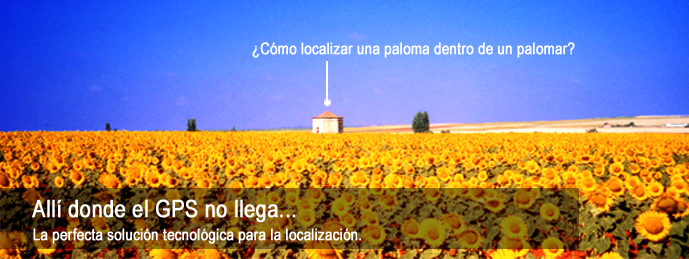
<style>
.page{position:relative;width:689px;height:259px}
.page>*{position:absolute;margin:0}
.t1{font:15.9px "ArialNarrow";color:#ffffff;font-weight:bold}
.t2{font:23.9px "ArialNarrow";color:#ffffff;font-weight:bold}
</style>
<div class="page">
<p class="t1" style="left:252px;top:42px;width:323px;height:16px">¿Cómo localizar una paloma dentro de un palomar?</p>
<p class="t2" style="left:32px;top:199px;width:264px;height:24px">Allí donde el GPS no llega...</p>
<p class="t1" style="left:33px;top:228px;width:328px;height:16px">La perfecta solución tecnológica para la localización.</p>
</div>
